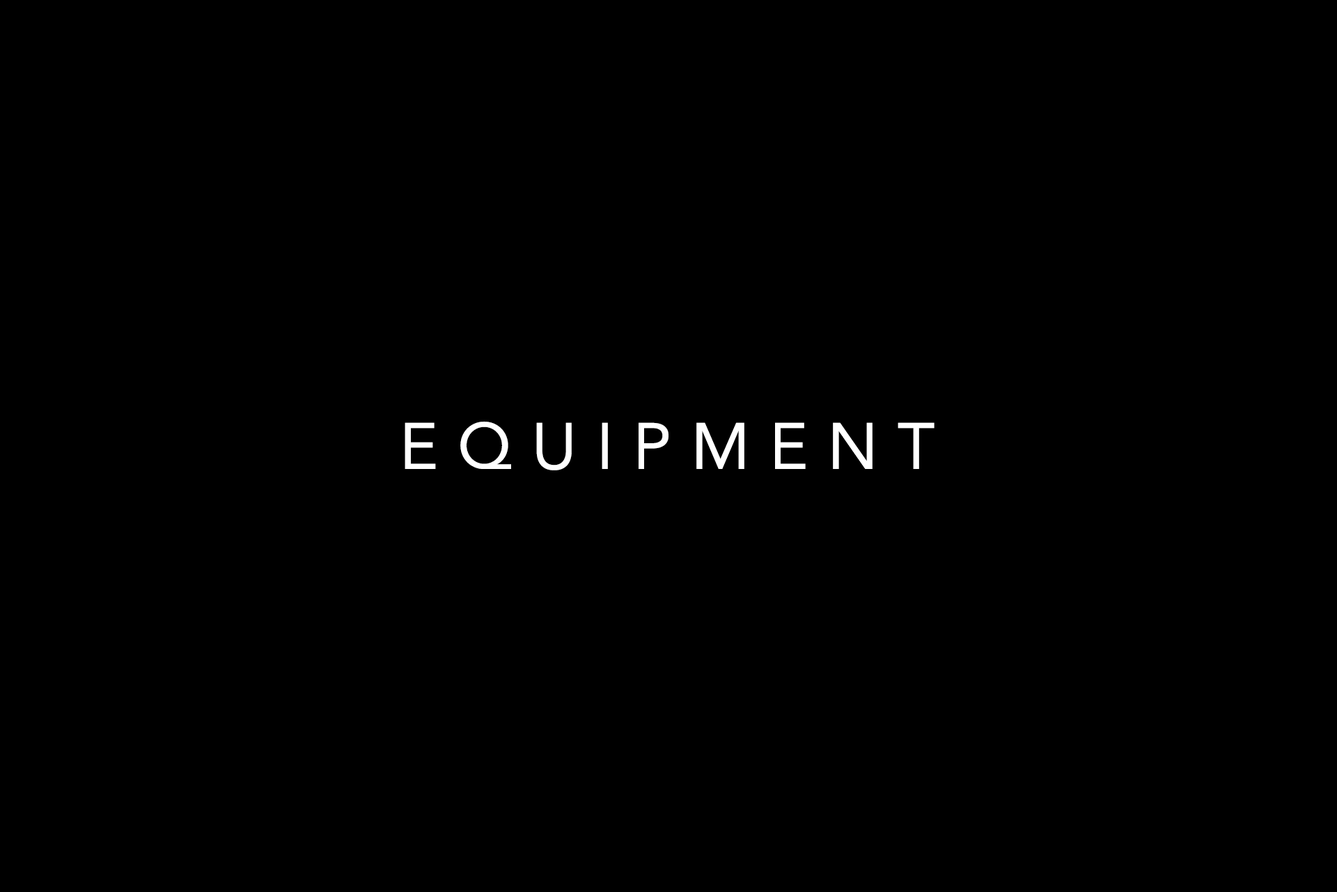
<style>
.page{position:relative;width:1337px;height:892px;background:#000000}
.page>*{position:absolute;margin:0}
.t1{font:65px "Avenir-Roman";letter-spacing:0.3em;color:#ffffff;text-transform:uppercase}
</style>
<div class="page">
<p class="t1" style="left:405px;top:421px;width:530px;height:49px">EQUIPMENT</p>
</div>
